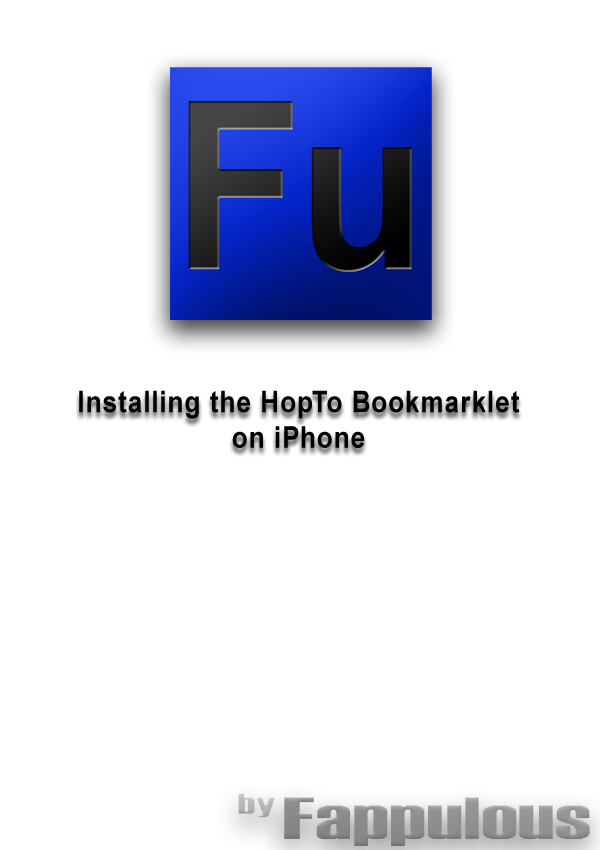
<style>
.page{position:relative;width:600px;height:850px;background:#ffffff}
.page>*{position:absolute;margin:0}
.t1{font:30px/35.4px "Arial-BoldMT";letter-spacing:0.04em;color:#000000;scale:0.87 1}
</style>
<div class="page">
<p class="t1" style="left:79px;top:390px;width:441px;height:58px;text-align:center">Installing the HopTo Bookmarklet<br>on iPhone</p>
</div>
